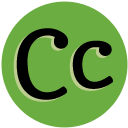
<style>
.page{position:relative;width:128px;height:128px;background:#6cad42}
.page>*{position:absolute;margin:0}
.t1{font:95px "Copse";color:#000000}
</style>
<div class="page">
<p class="t1" style="left:16px;top:28px;width:53px;height:72px">C</p>
<p class="t1" style="left:72px;top:40px;width:41px;height:49px">c</p>
</div>
